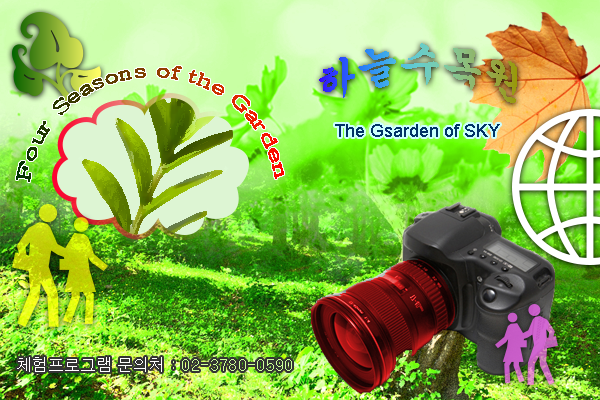
<style>
.page{position:relative;width:600px;height:400px}
.page>*{position:absolute;margin:0}
.t1{font:42px "Gungsuh"}
.t2{font:18px "Batang"}
.t3{font:18px "ArialMT";color:#003366}
.t4{font:16px "Dotum";color:#ccff99}
.t5{font:16px "Dotum";color:#ffffff}
</style>
<div class="page">
<p class="t1" style="left:319px;top:43px;width:198px;height:60px">하늘수목원</p>
<p class="t2" style="left:16px;top:66px;width:268px;height:116px">Four Seasons of the Garden</p>
<p class="t3" style="left:335px;top:124px;width:165px;height:13px">The Gsarden of SKY</p>
<p class="t4" style="left:17px;top:357px;width:275px;height:15px"><span class="t5">체험프로그램 문의처</span> : 02-3780-0590</p>
</div>
